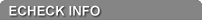
<style>
.page{position:relative;width:202px;height:20px;background:#858585}
.page>*{position:absolute;margin:0}
.t1{font:13.3px "Arial-BoldMT";color:#ffffff}
</style>
<div class="page">
<p class="t1" style="left:9px;top:5px;width:91px;height:11px">ECHECK INFO</p>
</div>
